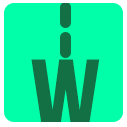
<style>
.page{position:relative;width:127px;height:127px;background:#00ffa8}
.page>*{position:absolute;margin:0}
.t1{font:91.1px "BebasNeue";color:#137045;scale:1.39 1}
</style>
<div class="page">
<p class="t1" style="left:31px;top:59px;width:69px;height:65px">W</p>
</div>
